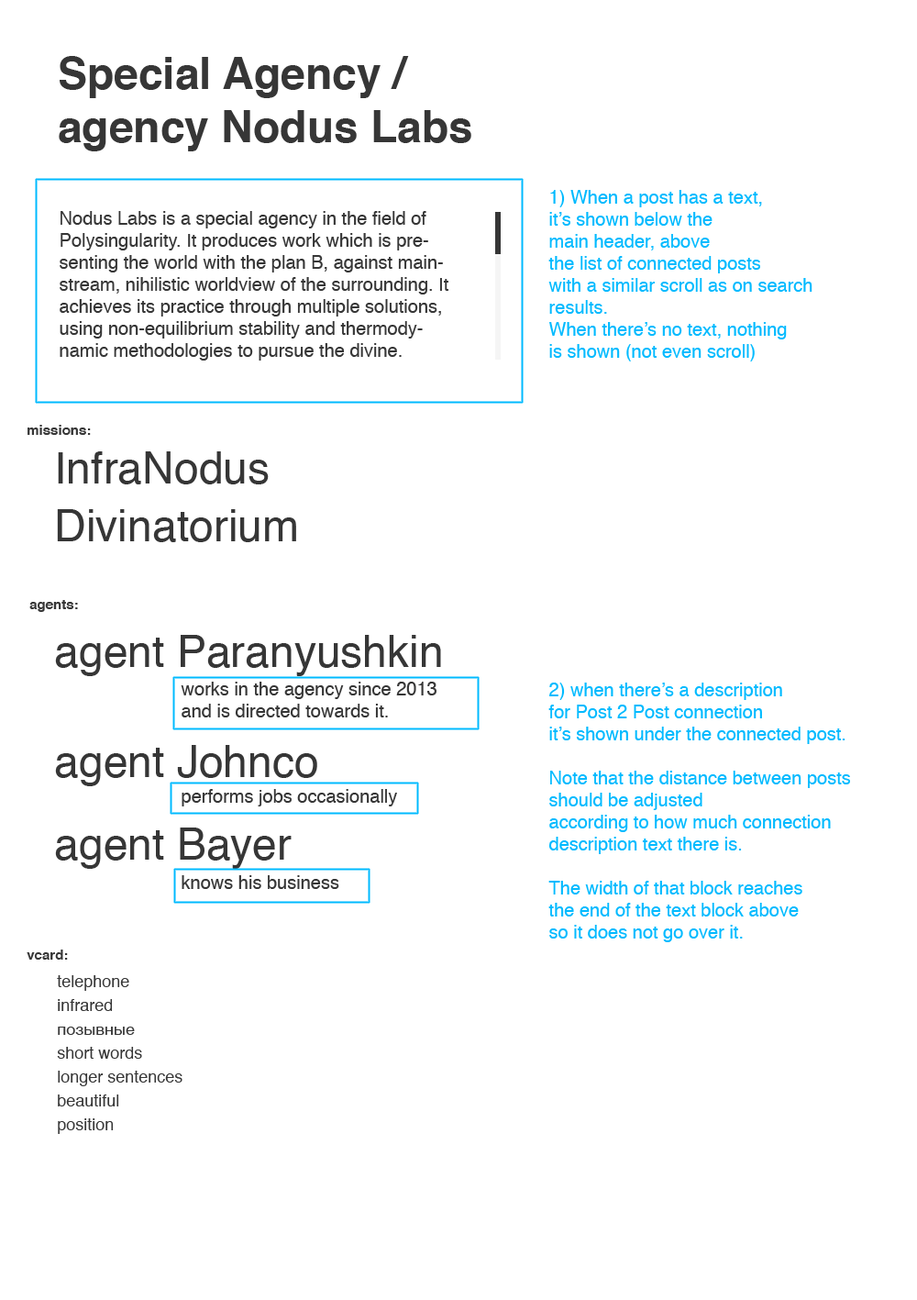
<style>
.page{position:relative;width:917px;height:1300px;background:#ffffff}
.page>*{position:absolute;margin:0}
.t1{font:44px "Helvetica-Bold";color:#363636}
.t2{font:18.3px "Helvetica";color:#00baff}
.t3{font:18.3px "Helvetica";color:#363636}
.t4{font:13.8px "Helvetica-Bold";color:#363636}
.t5{font:44px/57.8px "Helvetica";color:#363636}
.t6{font:44px/100.9px "Helvetica";color:#363636}
.t7{font:44px/110.1px "Helvetica";color:#363636}
.t8{font:44px/82.6px "Helvetica";color:#363636}
.t9{font:16.5px/23.9px "Helvetica";color:#363636}
</style>
<div class="page">
<p class="t1" style="left:59px;top:56px;width:413px;height:95px">Special Agency /<br>agency Nodus Labs</p>
<p class="t2" style="left:549px;top:190px;width:264px;height:171px">1) When a post has a text,<br>it’s shown below the <br>main header, above <br>the list of connected posts<br>with a similar scroll as on search<br>results.<br>When there’s no text, nothing<br>is shown (not even scroll)</p>
<p class="t3" style="left:60px;top:211px;width:389px;height:150px">Nodus Labs is a special agency in the field of Polysingularity. It produces work which is presenting the world with the plan B, against mainstream, nihilistic worldview of the surrounding. It achieves its practice through multiple solutions, using non-equilibrium stability and thermodynamic methodologies to pursue the divine.</p>
<p class="t4" style="left:28px;top:425px;width:63px;height:10px">missions:</p>
<p class="t5" style="left:57px;top:451px;width:239px;height:91px">InfraNodus<br>Divinatorium</p>
<p class="t4" style="left:29px;top:600px;width:49px;height:12px">agents:</p>
<p class="t6" style="left:55px;top:635px;width:386px;height:234px">agent Paranyushkin<br><span class="t7">agent Johnco<br></span><span class="t8">agent Bayer</span></p>
<p class="t3" style="left:181px;top:682px;width:256px;height:35px">works in the agency since 2013 and is directed towards it.</p>
<p class="t2" style="left:549px;top:683px;width:301px;height:259px">2) when there’s a description<br>for Post 2 Post connection<br>it’s shown under the connected post.<br><br>Note that the distance between posts<br>should be adjusted<br>according to how much connection<br>description text there is.<br><br>The width of that block reaches<br>the end of the text block above<br>so it does not go over it.</p>
<p class="t3" style="left:182px;top:789px;width:215px;height:17px">performs jobs occasionally</p>
<p class="t3" style="left:182px;top:875px;width:157px;height:14px">knows his business</p>
<p class="t4" style="left:27px;top:949px;width:41px;height:11px">vcard:</p>
<p class="t9" style="left:57px;top:975px;width:126px;height:159px">telephone<br>infrared<br>позывные<br>short words<br>longer sentences<br>beautiful<br>position</p>
</div>
